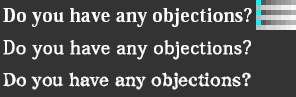
<style>
.page{position:relative;width:296px;height:97px;background:#333333}
.page>*{position:absolute;margin:0}
.t1{font:18px/32px "KozMinPro-Heavy";letter-spacing:0.022em;color:#ffffff}
.t2{font:18px/32px "AdobeFangsongStd-Regular";letter-spacing:0.028em;color:#ffffff;font-weight:bold}
.t3{font:18px/32px "ComicMysteryStd-DB";letter-spacing:-0.006em;color:#ffffff}
</style>
<div class="page">
<p class="t1" style="left:3px;top:8px;width:249px;height:82px">Do you have any objections?<br><span class="t2">Do you have any objections?<br></span><span class="t3">Do you have any objections?</span></p>
</div>
